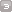
<style>
.page{position:relative;width:12px;height:12px;background:#aba5a5}
.page>*{position:absolute;margin:0}
.t1{font:8px "Kroeger0553";color:#ffffff}
</style>
<div class="page">
<p class="t1" style="left:4px;top:4px;width:5px;height:5px">3</p>
</div>
